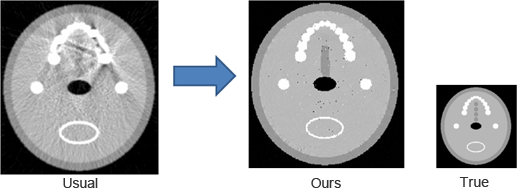
<style>
.page{position:relative;width:517px;height:193px;background:#ffffff}
.page>*{position:absolute;margin:0}
.t1{font:14px "ArialMT";letter-spacing:0.05em;color:#333333}
</style>
<div class="page">
<p class="t1" style="left:63px;top:178px;width:35px;height:10px">Usual</p>
<p class="t1" style="left:311px;top:178px;width:30px;height:10px">Ours</p>
<p class="t1" style="left:459px;top:177px;width:30px;height:10px">True</p>
</div>
